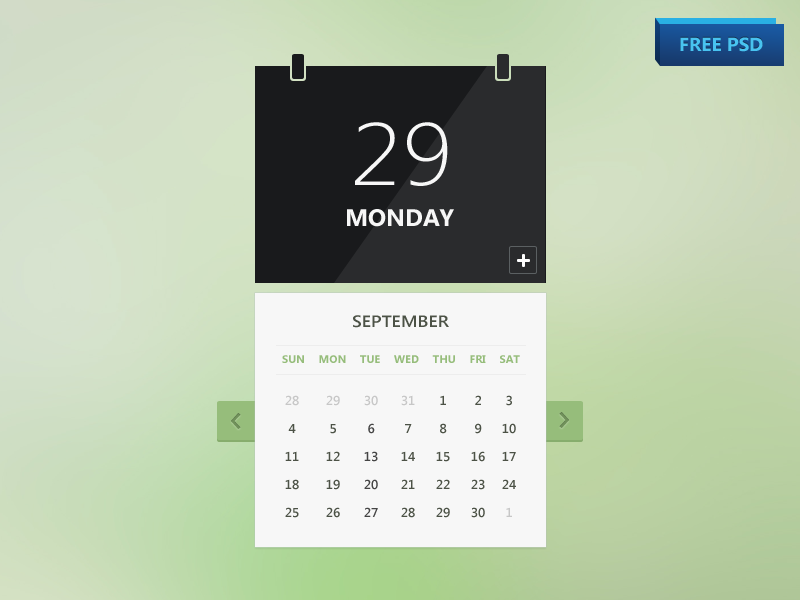
<style>
.page{position:relative;width:800px;height:600px}
.page>*{position:absolute;margin:0}
.t1{font:19px "SegoeUI-Bold";color:#48c3f0}
.t2{font:88.3px "SegoeUI-Light";color:#f7f7f7;scale:1.11 1}
.t3{font:24px "SegoeUI-Bold";color:#f7f7f7}
.t4{font:16.2px "SegoeUI-SemiBold";color:#4c5246;scale:1.11 1}
.t5{font:11px "SegoeUI-Bold";color:#96bd7b}
.t6{font:13px/28px "SegoeUI-SemiBold";color:#4c5246}
.t7{font:13px/28px "SegoeUI-SemiBold";color:#c7c7c7}
.t8{font:13px/28px "SegoeUI-SemiBold";color:#444444}
</style>
<div class="page">
<p class="t1" style="left:680px;top:37px;width:83px;height:15px">FREE PSD</p>
<p class="t2" style="left:355px;top:122px;width:93px;height:64px">29</p>
<p class="t3" style="left:347px;top:209px;width:107px;height:18px">MONDAY</p>
<p class="t4" style="left:353px;top:315px;width:96px;height:13px">SEPTEMBER</p>
<p class="t5" style="left:282px;top:355px;width:238px;height:8px">SUN     MON     TUE     WED     THU     FRI     SAT</p>
<p class="t6" style="left:285px;top:395px;width:14px;height:123px;text-align:center"><span class="t7">28<br></span>4<br>11<br>18<br>25</p>
<p class="t6" style="left:326px;top:395px;width:14px;height:123px;text-align:center"><span class="t7">29<br></span>5<br>12<br>19<br>26</p>
<p class="t8" style="left:364px;top:395px;width:14px;height:122px;text-align:center"><span class="t7">30<br></span>6<br>13<br>20<br>27</p>
<p class="t6" style="left:401px;top:395px;width:14px;height:123px;text-align:center"><span class="t7">31<br></span>7<br>14<br>21<br>28</p>
<p class="t6" style="left:436px;top:395px;width:14px;height:123px;text-align:center">1<br>8<br>15<br>22<br>29</p>
<p class="t6" style="left:471px;top:395px;width:14px;height:123px;text-align:center">2<br>9<br>16<br>23<br>30</p>
<p class="t6" style="left:502px;top:395px;width:14px;height:122px;text-align:center">3<br>10<br>17<br>24<br><span class="t7">1</span></p>
</div>
